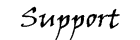
<style>
.page{position:relative;width:140px;height:40px;background:#ffffff}
.page>*{position:absolute;margin:0}
.t1{font:26.7px "VinerHandITC";color:#000000}
</style>
<div class="page">
<p class="t1" style="left:20px;top:6px;width:100px;height:36px">Support</p>
</div>
